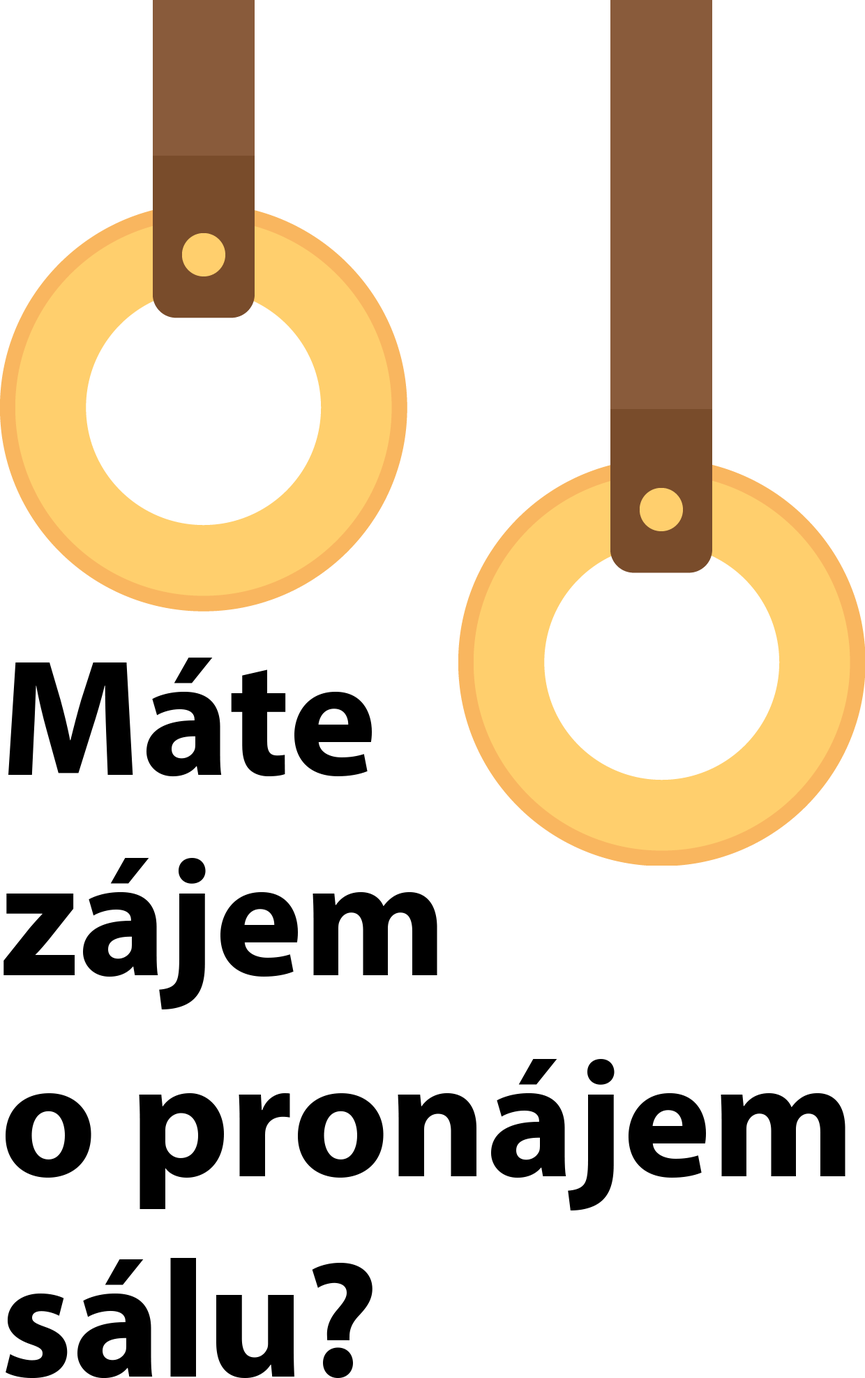
<style>
.page{position:relative;width:865px;height:1378px;background:#ffffff}
.page>*{position:absolute;margin:0}
.t1{font:167.2px "MyriadPro-Bold";color:#000000}
</style>
<div class="page">
<p class="t1" style="left:3px;top:657px;width:843px;height:721px">Máte<br>zájem<br>o pronájem<br>sálu?</p>
</div>
